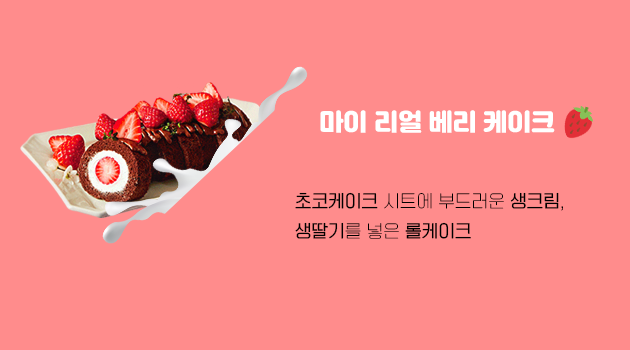
<style>
.page{position:relative;width:630px;height:350px;background:#ff8c8c}
.page>*{position:absolute;margin:0}
.t1{font:24px "Jalnan";color:#ffffff}
.t2{font:17px/30px "TTOmniGothicT";color:#000000}
.t3{font:17px/30px "TTOmniGothicM";color:#000000}
</style>
<div class="page">
<p class="t1" style="left:320px;top:110px;width:235px;height:23px">마이 리얼 베리 케이크</p>
<p class="t2" style="left:295px;top:192px;width:268px;height:47px"><span class="t3">초코케이크</span> 시트에 부드러운 <span class="t3">생크림</span>, <br><span class="t3">생딸기</span>를 넣은 <span class="t3">롤케이크</span></p>
</div>
